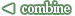
<style>
.page{position:relative;width:75px;height:16px;background:#ffffff}
.page>*{position:absolute;margin:0}
.t1{font:14px "RyuminPro-ExBold";letter-spacing:-0.06em;color:#ffffff}
.t2{font:14px "TimesNewRomanPSMT";letter-spacing:-0.06em;color:#ffffff}
</style>
<div class="page">
<p class="t1" style="left:3px;top:2px;width:67px;height:11px"><span class="t2">◄   </span>combine</p>
<p class="t1" style="left:3px;top:2px;width:67px;height:11px"><span class="t2">◄   </span>combine</p>
</div>
